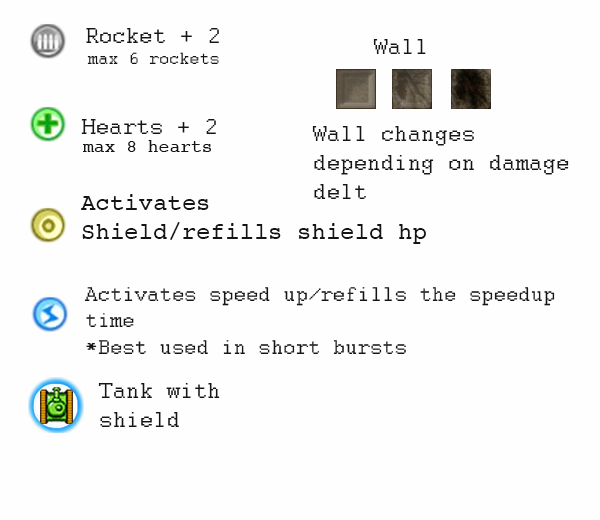
<style>
.page{position:relative;width:600px;height:520px;background:#fefefe}
.page>*{position:absolute;margin:0}
.t1{font:24px "Courier";color:#151515}
.t2{font:18px "Courier";color:#151515}
.t3{font:22px "Courier";color:#151515}
</style>
<div class="page">
<p class="t1" style="left:86px;top:28px;width:133px;height:15px">Rocket + 2</p>
<p class="t1" style="left:373px;top:39px;width:53px;height:15px">Wall</p>
<p class="t2" style="left:87px;top:52px;width:132px;height:12px">max 6 rockets</p>
<p class="t1" style="left:81px;top:119px;width:135px;height:15px">Hearts + 2</p>
<p class="t1" style="left:312px;top:126px;width:257px;height:73px">Wall changes <br>depending on damage <br>delt</p>
<p class="t2" style="left:83px;top:140px;width:128px;height:12px">max 8 hearts</p>
<p class="t1" style="left:81px;top:194px;width:345px;height:50px">Activates<br>Shield/refills shield hp</p>
<p class="t3" style="left:84px;top:287px;width:471px;height:67px">Activates speed up/refills the speedup <br>time<br>*Best used in short bursts</p>
<p class="t1" style="left:98px;top:383px;width:122px;height:44px">Tank with<br>shield</p>
</div>
